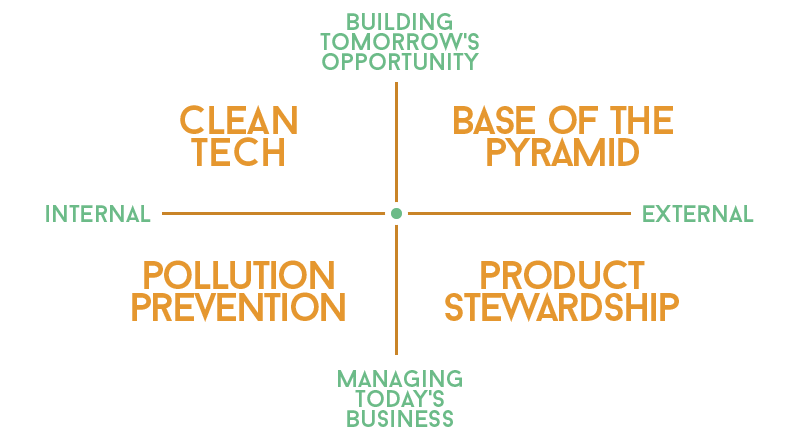
<style>
.page{position:relative;width:800px;height:440px;background:#ffffff}
.page>*{position:absolute;margin:0}
.t1{font:24px/20px "BaronNeue";color:#6cbb88}
.t2{font:40px/32px "BaronNeue";color:#e5972f}
.t3{font:40px "BaronNeue";letter-spacing:-0.05em;color:#e5972f}
.t4{font:24px "BaronNeue";color:#6cbb88}
.t5{font:40px/32px "BaronNeue";letter-spacing:-0.05em;color:#e5972f}
</style>
<div class="page">
<p class="t1" style="left:320px;top:13px;width:159px;height:57px;text-align:center">building<br>tomorrow's<br>opportunity</p>
<p class="t2" style="left:180px;top:105px;width:117px;height:61px;text-align:center">clean<br>tech</p>
<p class="t3" style="left:454px;top:105px;width:219px;height:61px">base of the pyramid</p>
<p class="t4" style="left:46px;top:205px;width:105px;height:17px">internal</p>
<p class="t4" style="left:643px;top:205px;width:111px;height:17px">external</p>
<p class="t5" style="left:132px;top:260px;width:213px;height:62px;text-align:center">pollution<br>prevention</p>
<p class="t5" style="left:445px;top:260px;width:234px;height:62px;text-align:center">product<br>stewardship</p>
<p class="t1" style="left:338px;top:370px;width:124px;height:57px;text-align:center">managing<br>today's<br>business</p>
</div>
